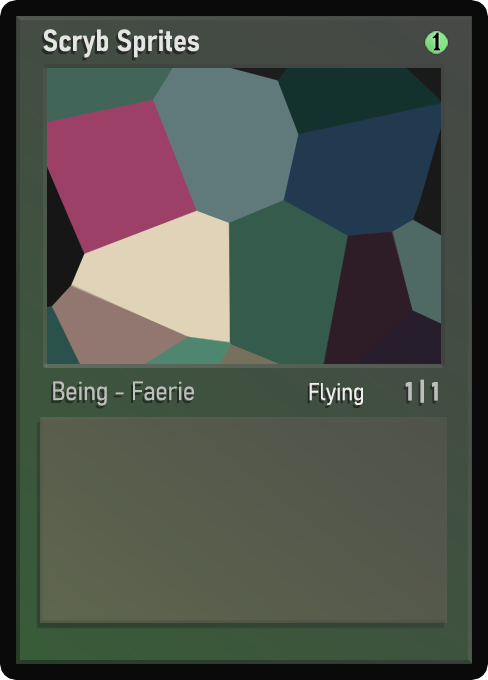
<style>
.page{position:relative;width:488px;height:680px}
.page>*{position:absolute;margin:0}
.t1{font:30px "Bahnschrift-SemiBoldSemiCondensed";color:#f2f2f2;font-weight:bold}
.t2{font:25px "WTRRoycroft";color:#000000;font-weight:bold;scale:1.09 1}
.t3{font:26px "Bahnschrift-LightSemiCondensed";color:#c8c8c8;font-weight:bold}
.t4{font:24px "Bahnschrift-LightSemiCondensed";color:#f0efef;font-weight:bold}
.t5{font:26px "Bahnschrift-BoldSemiCondensed";color:#bdbfbd;font-weight:bold}
</style>
<div class="page">
<p class="t1" style="left:43px;top:29px;width:156px;height:29px;opacity:0.9">Scryb Sprites</p>
<p class="t2" style="left:432px;top:32px;width:9px;height:19px">1</p>
<p class="t3" style="left:53px;top:381px;width:141px;height:25px;opacity:0.9">Being - Faerie</p>
<p class="t4" style="left:309px;top:383px;width:54px;height:23px">Flying</p>
<p class="t5" style="left:405px;top:379px;width:33px;height:24px">1 | 1</p>
</div>
